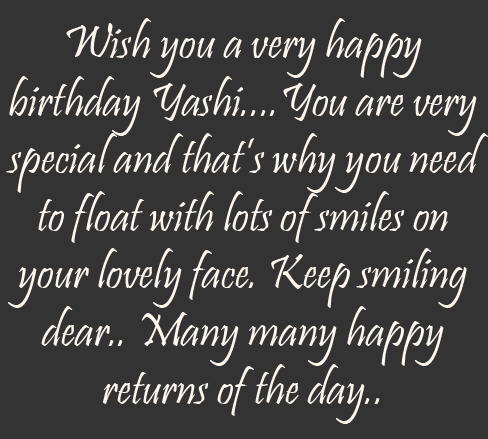
<style>
.page{position:relative;width:488px;height:439px;background:#333333}
.page>*{position:absolute;margin:0}
.t1{font:48px "Pristina-Regular";color:#fdf7ef}
</style>
<div class="page">
<p class="t1" style="left:6px;top:18px;width:482px;height:406px;text-align:center">Wish you a very happy birthday Yashi....You are very special and that’s why you need to float with lots of smiles on your lovely face. Keep smiling dear.. Many many happy returns of the day..</p>
</div>
